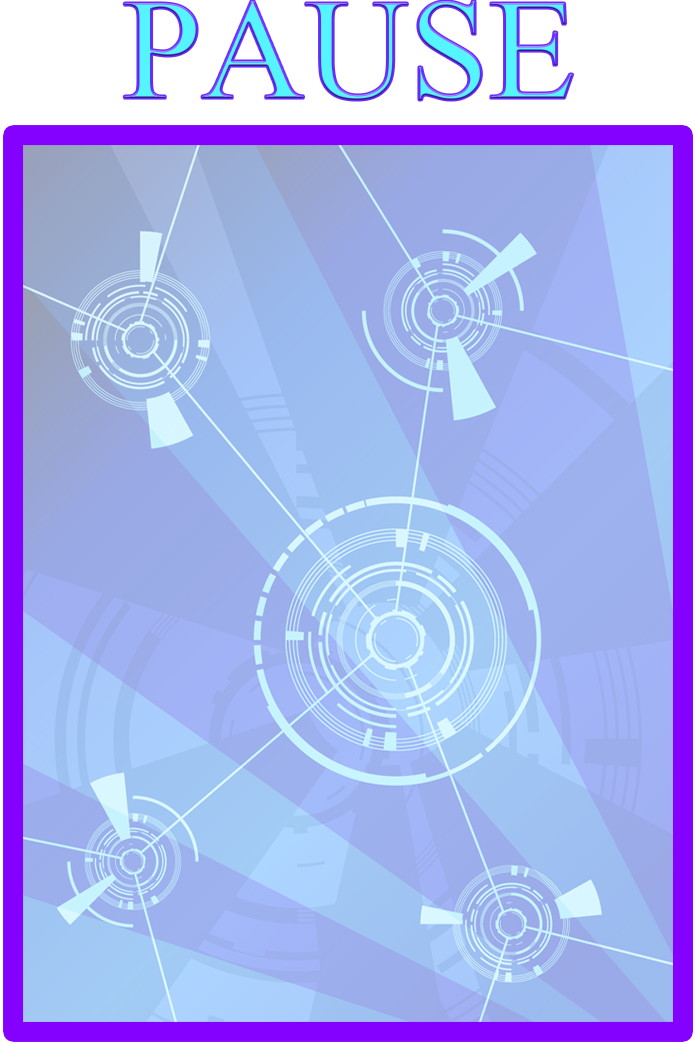
<style>
.page{position:relative;width:697px;height:1044px}
.page>*{position:absolute;margin:0}
.t1{font:143.5px "TimesNewRomanPSMT";color:#55f5ff}
</style>
<div class="page">
<p class="t1" style="left:124px;top:1px;width:449px;height:99px">PAUSE</p>
</div>
